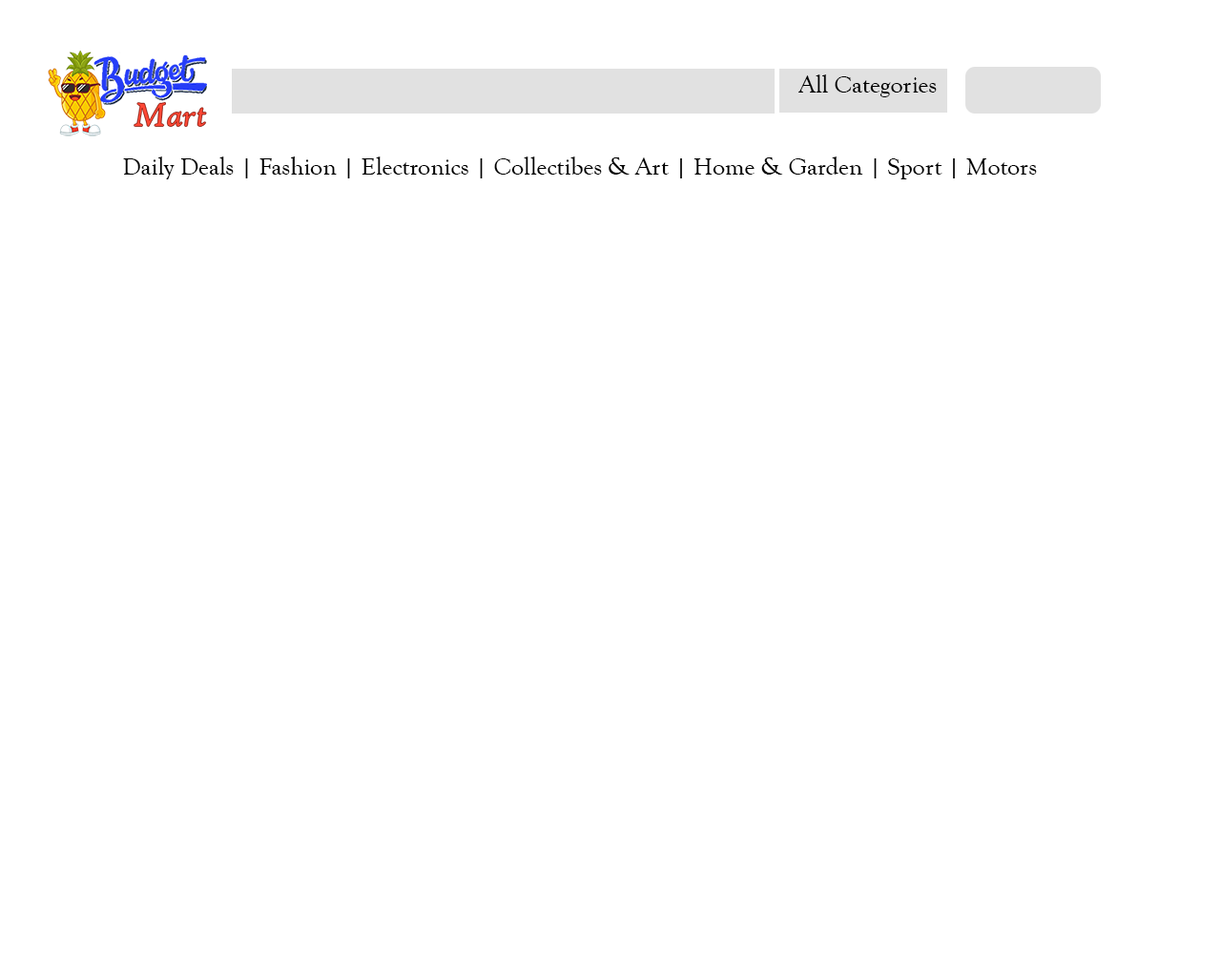
<style>
.page{position:relative;width:1221px;height:977px;background:#ffffff}
.page>*{position:absolute;margin:0}
.t1{font:24.8px "GoudyOldStyleT-Regular";color:#000000}
</style>
<div class="page">
<p class="t1" style="left:798px;top:74px;width:139px;height:23px">All Categories</p>
<p class="t1" style="left:123px;top:156px;width:914px;height:23px">Daily Deals | Fashion | Electronics | Collectibes &amp; Art | Home &amp; Garden | Sport | Motors</p>
</div>
